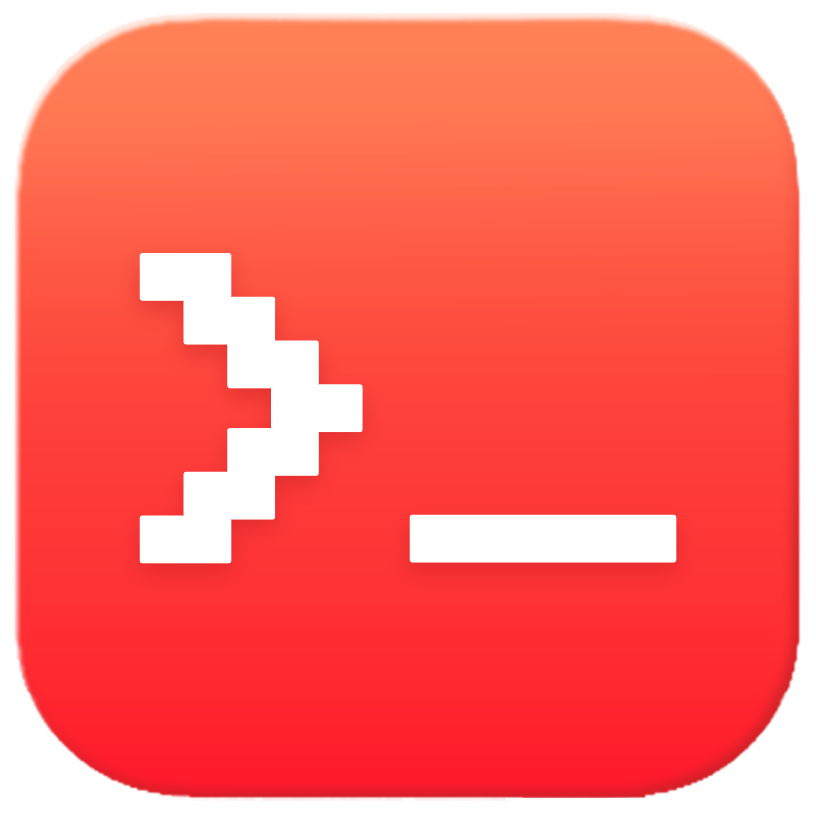
<style>
.page{position:relative;width:816px;height:816px}
.page>*{position:absolute;margin:0}
.t1{font:350px "PressStart2P-Regular";letter-spacing:0.26em;color:#ffffff}
</style>
<div class="page">
<p class="t1" style="left:141px;top:255px;width:220px;height:307px">&gt;</p>
</div>
